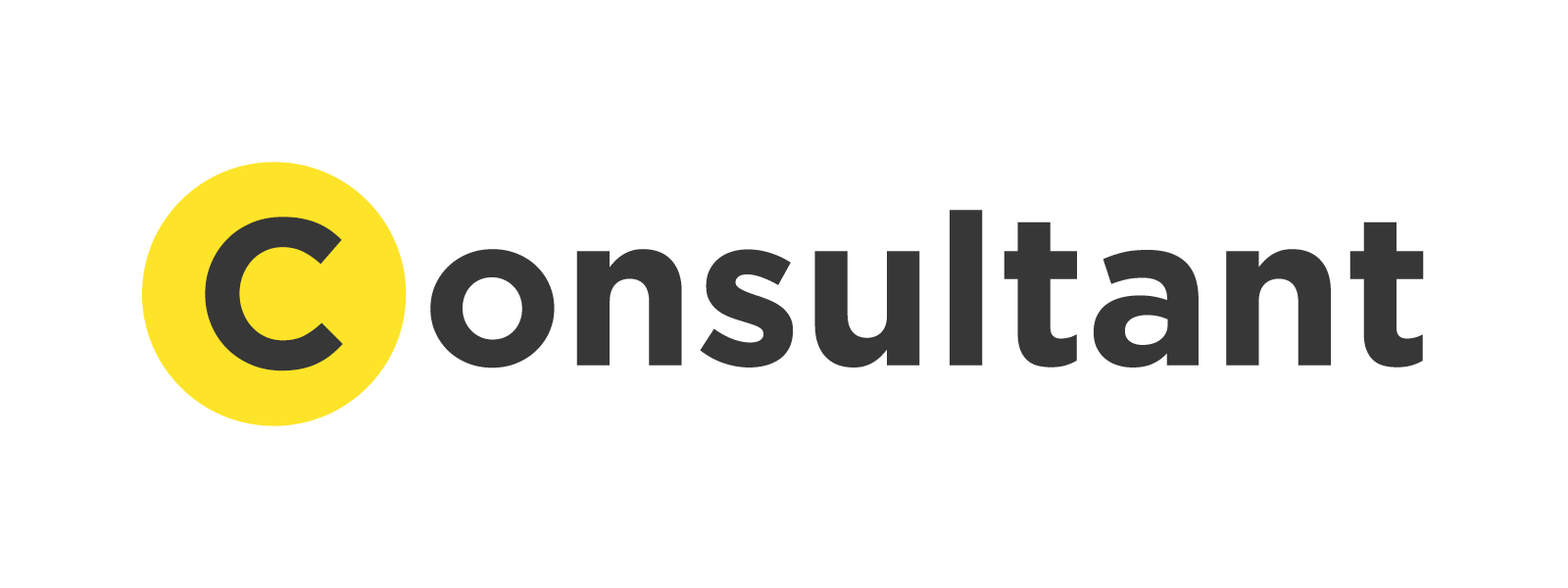
<style>
.page{position:relative;width:1568px;height:588px;background:#ffffff}
.page>*{position:absolute;margin:0}
.t1{font:212.3px "GothamBold";color:#373737}
</style>
<div class="page">
<p class="t1" style="left:430px;top:210px;width:994px;height:158px">onsultant</p>
<p class="t1" style="left:205px;top:217px;width:138px;height:154px">C</p>
</div>
